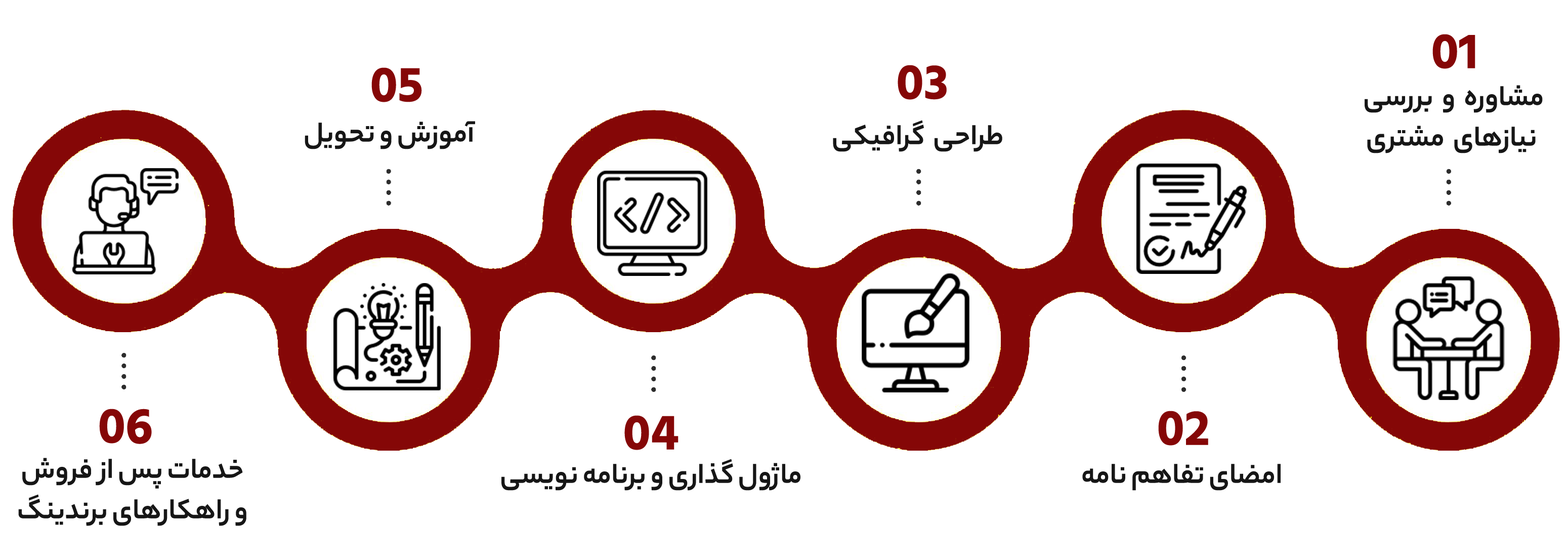
<style>
.page{position:relative;width:1568px;height:559px;background:#ffffff}
.page>*{position:absolute;margin:0}
.t1{font:50.6px "HindMadurai-Bold";color:#850707}
.t2{font:30.4px/40.5px "YekanBakhFaNum-Bold";color:#161616}
.t3{font:30.4px "YekanBakhFaNum-Bold";color:#161616}
</style>
<div class="page">
<p class="t1" style="left:1432px;top:34px;width:43px;height:35px">01</p>
<p class="t1" style="left:898px;top:65px;width:49px;height:35px">03</p>
<p class="t1" style="left:371px;top:67px;width:51px;height:35px">05</p>
<p class="t2" style="left:1365px;top:85px;width:178px;height:68px;text-align:center">مشاوره  و  بررسی <br>نیازهای  مشتری</p>
<p class="t3" style="left:305px;top:121px;width:170px;height:28px">آموزش و تحویل</p>
<p class="t3" style="left:833px;top:120px;width:169px;height:32px">طراحی  گرافیکی</p>
<p class="t1" style="left:99px;top:408px;width:53px;height:36px">06</p>
<p class="t1" style="left:1158px;top:410px;width:50px;height:35px">02</p>
<p class="t1" style="left:624px;top:415px;width:55px;height:35px">04</p>
<p class="t2" style="left:18px;top:457px;width:228px;height:69px;text-align:center">خدمات پس از فروش<br>و راهکارهای برندینگ</p>
<p class="t3" style="left:501px;top:458px;width:299px;height:32px">ماژول گذاری و برنامه نویسی</p>
<p class="t3" style="left:1082px;top:463px;width:199px;height:27px">امضای تفاهم نامه</p>
</div>
